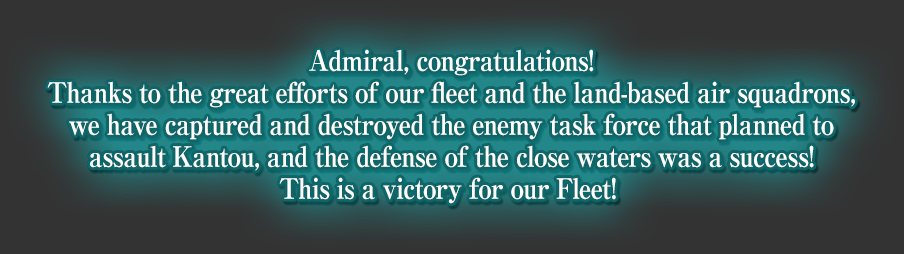
<style>
.page{position:relative;width:904px;height:254px;background:#333333}
.page>*{position:absolute;margin:0}
.t1{font:28px/32px "RyuminPro-ExBold";letter-spacing:-0.04em;color:#ffffff;scale:0.9 1}
</style>
<div class="page">
<p class="t1" style="left:47px;top:49px;width:808px;height:155px;text-align:center">Admiral, congratulations!<br>Thanks to the great efforts of our fleet and the land-based air squadrons,<br>we have captured and destroyed the enemy task force that planned to<br>assault Kantou, and the defense of the close waters was a success!<br>This is a victory for our Fleet!</p>
</div>
